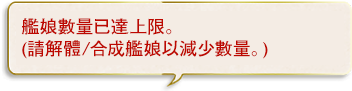
<style>
.page{position:relative;width:352px;height:91px;background:#f4ece4}
.page>*{position:absolute;margin:0}
.t1{font:18px/22px "FutoGoB101Pr5-Bold";color:#bd0800}
</style>
<div class="page">
<p class="t1" style="left:21px;top:18px;width:247px;height:41px">艦娘數量已達上限。<br>(請解體/合成艦娘以減少數量。)</p>
</div>
